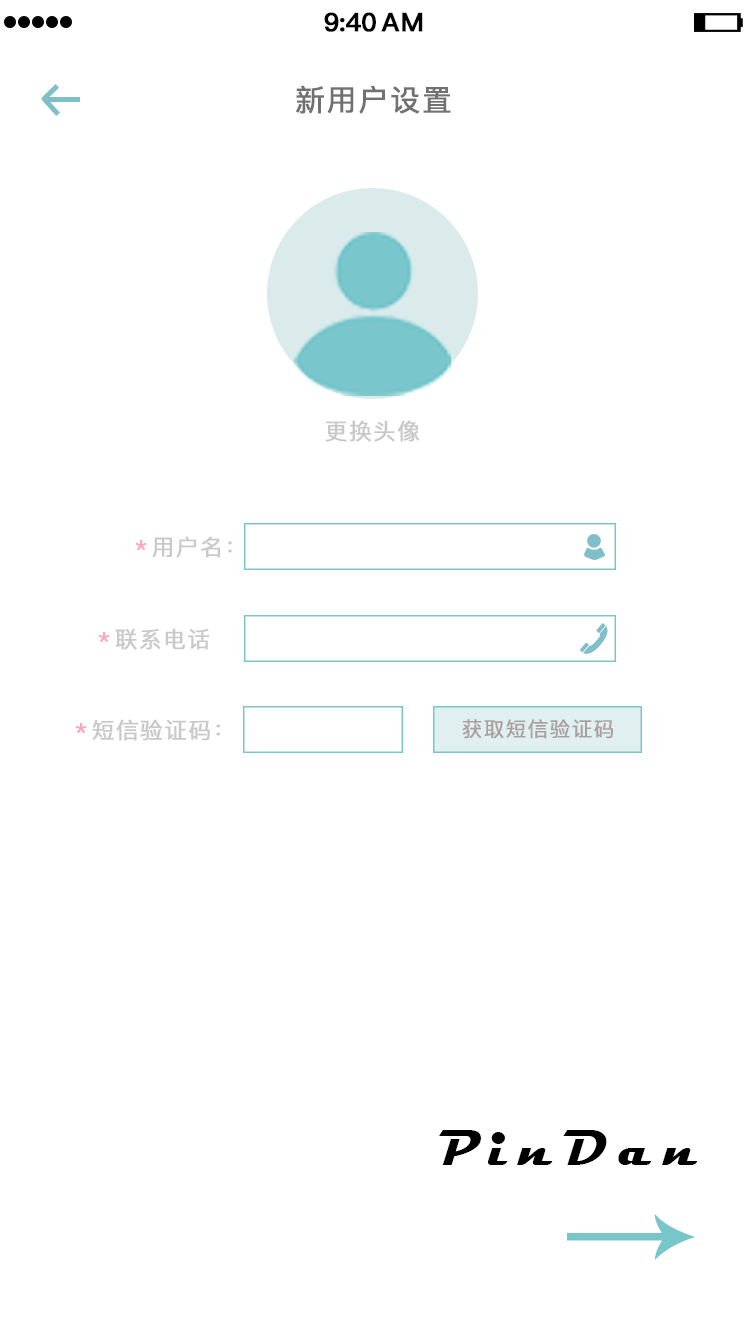
<style>
.page{position:relative;width:750px;height:1334px;background:#ffffff}
.page>*{position:absolute;margin:0}
.t1{font:25.4px "PingFang-SC-Bold";letter-spacing:-0.028em;color:#000000;font-weight:bold}
.t2{font:25.4px "PingFang-SC-Bold";letter-spacing:0.052em;color:#000000;font-weight:bold}
.t3{font:29.4px "PingFang-SC-Medium";letter-spacing:0.052em;color:#717171;font-weight:bold}
.t4{font:22.4px "PingFang-SC-Medium";letter-spacing:0.052em;color:#c9c9c9;font-weight:bold}
.t5{font:22.4px "PingFang-SC-Medium";letter-spacing:0.052em;color:#ffa5b7;font-weight:bold}
.t6{font:20.4px "PingFang-SC-Medium";letter-spacing:0.052em;color:#aa9f9f;font-weight:bold}
.t7{font:51.5px "Magneto-Bold";letter-spacing:0.214em;color:#000000}
</style>
<div class="page">
<p class="t1" style="left:324px;top:12px;width:52px;height:20px">9:40</p>
<p class="t2" style="left:381px;top:12px;width:42px;height:20px">AM</p>
<p class="t3" style="left:296px;top:85px;width:155px;height:29px">新用户设置</p>
<p class="t4" style="left:325px;top:420px;width:95px;height:22px">更换头像</p>
<p class="t5" style="left:135px;top:540px;width:12px;height:10px">*</p>
<p class="t4" style="left:152px;top:536px;width:80px;height:22px">用户名：</p>
<p class="t4" style="left:115px;top:628px;width:95px;height:22px">联系电话</p>
<p class="t5" style="left:98px;top:632px;width:12px;height:10px">*</p>
<p class="t5" style="left:75px;top:723px;width:12px;height:10px">*</p>
<p class="t4" style="left:92px;top:719px;width:128px;height:22px">短信验证码：</p>
<p class="t6" style="left:462px;top:719px;width:151px;height:20px">获取短信验证码</p>
<p class="t7" style="left:439px;top:1130px;width:259px;height:35px">PinDan</p>
</div>
